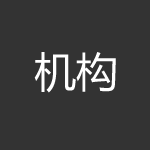
<style>
.page{position:relative;width:150px;height:150px;background:#333333}
.page>*{position:absolute;margin:0}
.t1{font:41.7px "MicrosoftYaHei";color:#ffffff}
</style>
<div class="page">
<p class="t1" style="left:34px;top:52px;width:82px;height:41px">机构</p>
</div>
